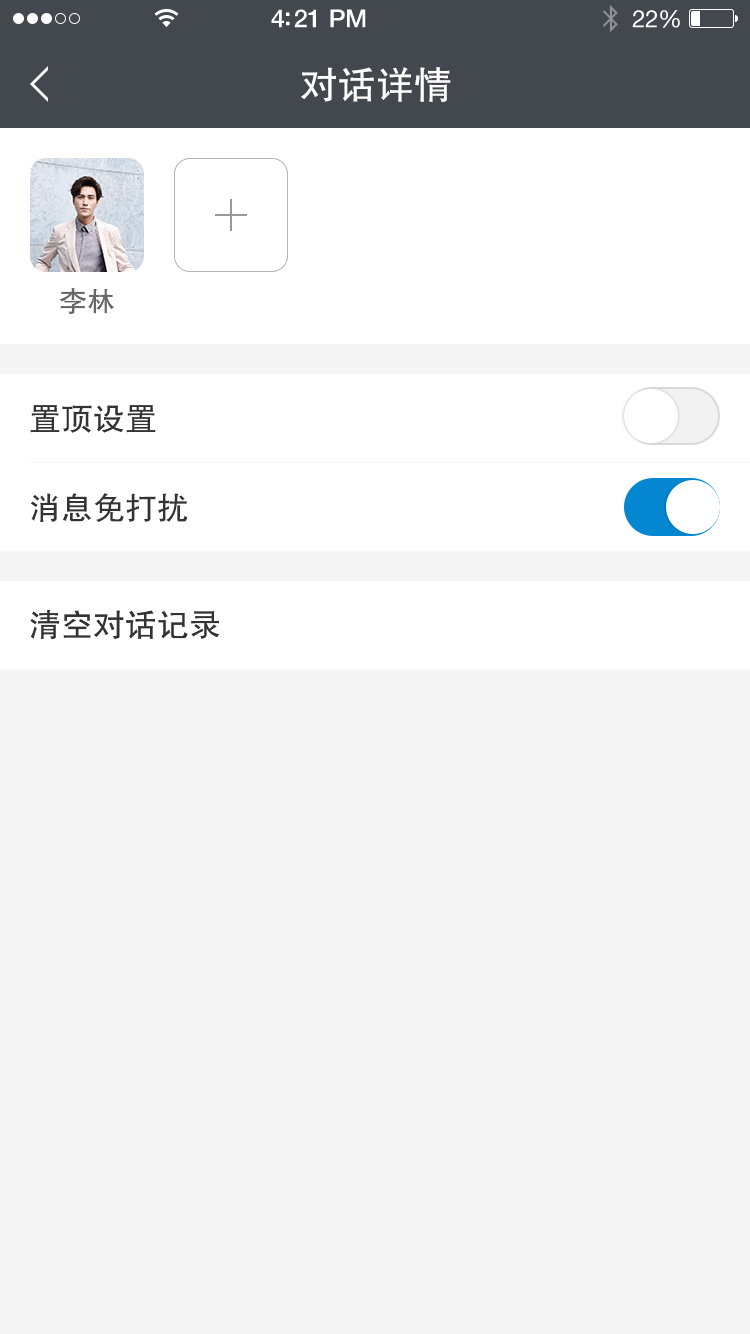
<style>
.page{position:relative;width:750px;height:1334px;background:#f5f5f5}
.page>*{position:absolute;margin:0}
.t1{font:38px "FZHTJW--GB1-0";color:#ffffff}
.t2{font:28px "FZHTJW--GB1-0";color:#666666}
.t3{font:32px "FZHTJW--GB1-0";color:#333333}
.t4{font:32.1px "FZHTJW--GB1-0";color:#333333}
</style>
<div class="page">
<p class="t1" style="left:301px;top:67px;width:150px;height:35px">对话详情</p>
<p class="t2" style="left:59px;top:288px;width:55px;height:26px">李林</p>
<p class="t3" style="left:30px;top:405px;width:126px;height:28px">置顶设置</p>
<p class="t4" style="left:31px;top:493px;width:157px;height:29px">消息免打扰</p>
<p class="t3" style="left:30px;top:610px;width:190px;height:30px">清空对话记录</p>
</div>
